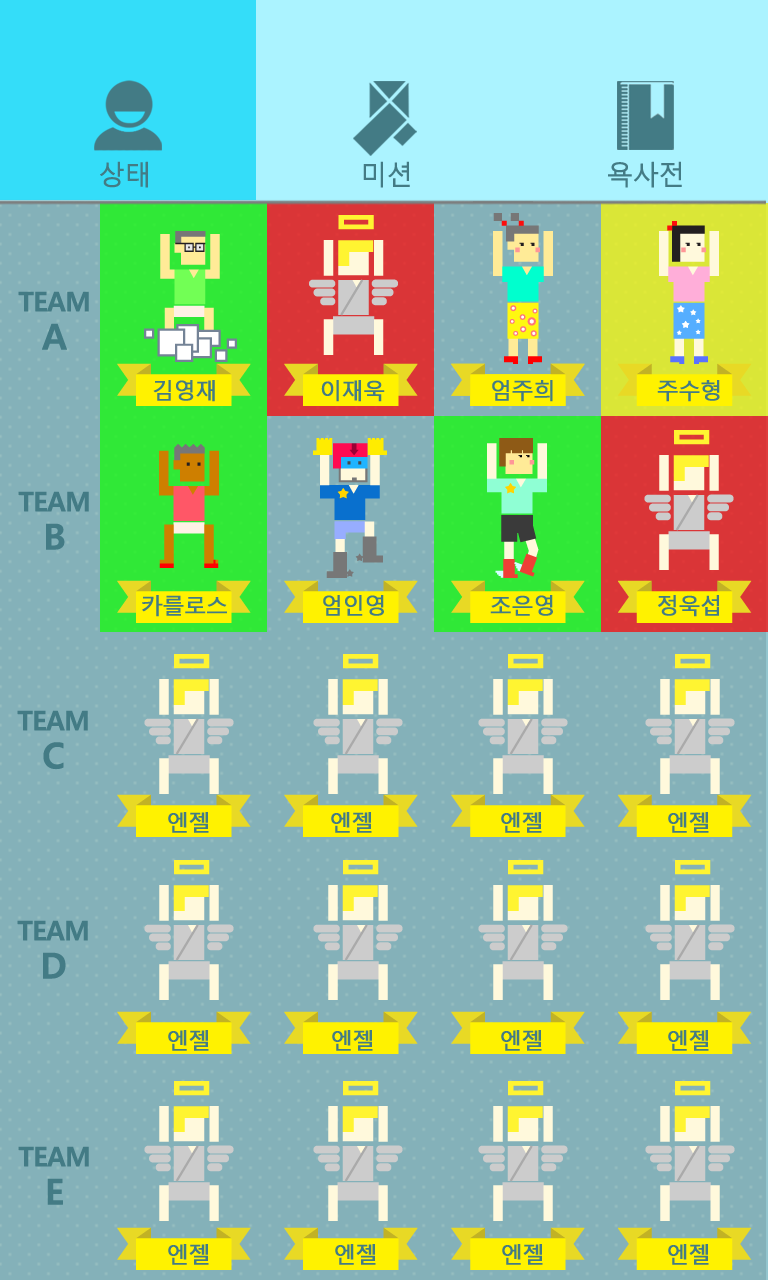
<style>
.page{position:relative;width:768px;height:1280px;background:#84b1b9}
.page>*{position:absolute;margin:0}
.t1{font:26.7px "MalgunGothicRegular";letter-spacing:-0.05em;color:#437b85;font-weight:bold}
.t2{font:26.7px/31.1px "MalgunGothicBold";letter-spacing:-0.05em;color:#437b85;font-weight:bold}
.t3{font:35.6px/31.1px "MalgunGothicBold";letter-spacing:-0.05em;color:#437b85;font-weight:bold}
.t4{font:22.2px "MalgunGothicRegular";letter-spacing:-0.05em;color:#437b85;font-weight:bold}
</style>
<div class="page">
<p class="t1" style="left:100px;top:161px;width:48px;height:27px">상태</p>
<p class="t1" style="left:363px;top:161px;width:47px;height:27px">미션</p>
<p class="t1" style="left:608px;top:161px;width:74px;height:27px">욕사전</p>
<p class="t2" style="left:18px;top:291px;width:71px;height:59px;text-align:center">TEAM<br><span class="t3">A</span></p>
<p class="t4" style="left:153px;top:380px;width:62px;height:22px">김영재</p>
<p class="t4" style="left:321px;top:380px;width:64px;height:22px">이재욱</p>
<p class="t4" style="left:492px;top:380px;width:61px;height:22px">엄주희</p>
<p class="t4" style="left:657px;top:380px;width:63px;height:22px">주수형</p>
<p class="t2" style="left:18px;top:491px;width:71px;height:59px;text-align:center">TEAM<br><span class="t3">B</span></p>
<p class="t4" style="left:142px;top:595px;width:85px;height:22px">카를로스</p>
<p class="t4" style="left:323px;top:595px;width:61px;height:21px">엄인영</p>
<p class="t4" style="left:490px;top:595px;width:63px;height:21px">조은영</p>
<p class="t4" style="left:658px;top:595px;width:61px;height:22px">정욱섭</p>
<p class="t2" style="left:17px;top:710px;width:71px;height:60px;text-align:center">TEAM<br><span class="t3">C</span></p>
<p class="t4" style="left:168px;top:812px;width:41px;height:21px">엔젤</p>
<p class="t4" style="left:331px;top:812px;width:41px;height:21px">엔젤</p>
<p class="t4" style="left:501px;top:812px;width:41px;height:21px">엔젤</p>
<p class="t4" style="left:668px;top:812px;width:41px;height:21px">엔젤</p>
<p class="t2" style="left:17px;top:920px;width:71px;height:59px;text-align:center">TEAM<br><span class="t3">D</span></p>
<p class="t4" style="left:168px;top:1030px;width:41px;height:21px">엔젤</p>
<p class="t4" style="left:332px;top:1030px;width:41px;height:21px">엔젤</p>
<p class="t4" style="left:501px;top:1030px;width:41px;height:21px">엔젤</p>
<p class="t4" style="left:668px;top:1030px;width:41px;height:21px">엔젤</p>
<p class="t2" style="left:18px;top:1146px;width:71px;height:59px;text-align:center">TEAM<br><span class="t3">E</span></p>
<p class="t4" style="left:168px;top:1244px;width:41px;height:21px">엔젤</p>
<p class="t4" style="left:335px;top:1244px;width:41px;height:21px">엔젤</p>
<p class="t4" style="left:502px;top:1244px;width:41px;height:21px">엔젤</p>
<p class="t4" style="left:668px;top:1244px;width:41px;height:21px">엔젤</p>
</div>
